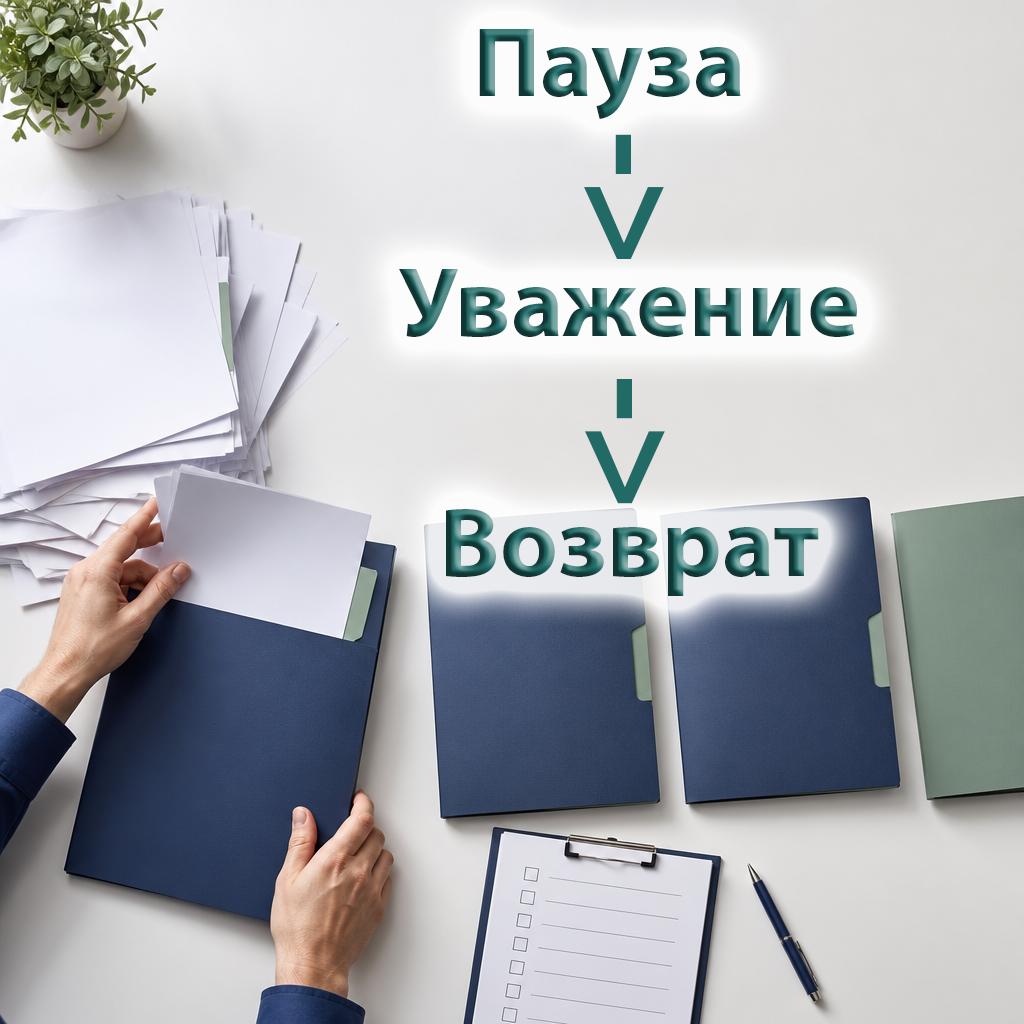
<style>
.page{position:relative;width:1024px;height:1024px}
.page>*{position:absolute;margin:0}
.t1{font:100px "MyriadPro-Bold"}
.t2{font:150px "MyriadPro-Bold";color:#216a66}
</style>
<div class="page">
<p class="t1" style="left:399px;top:29px;width:458px;height:567px;text-align:center">Пауза <br><br> Уважение<br> <br> Возврат</p>
<p class="t2" style="left:584px;top:134px;width:80px;height:125px;rotate:90deg">-&gt;</p>
<p class="t2" style="left:585px;top:379px;width:80px;height:125px;rotate:90deg">-&gt;</p>
</div>
